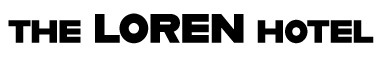
<style>
.page{position:relative;width:386px;height:60px;background:#ffffff}
.page>*{position:absolute;margin:0}
.t1{font:47.5px "Alfarn";letter-spacing:-0.025em;color:#000000}
.t2{font:37.4px "Alfarn";letter-spacing:-0.025em;color:#000000}
</style>
<div class="page">
<p class="t1" style="left:8px;top:13px;width:366px;height:31px"><span class="t2">the</span> loren <span class="t2">hotel</span></p>
</div>
